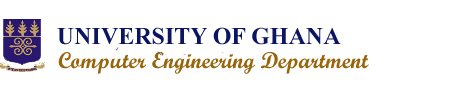
<style>
.page{position:relative;width:450px;height:90px;background:#ffffff}
.page>*{position:absolute;margin:0}
.t1{font:24px "TimesNewRomanPS-BoldMT";color:#0b1562}
.t2{font:23px "ScriptMTBold";color:#98650b}
</style>
<div class="page">
<p class="t1" style="left:57px;top:27px;width:284px;height:18px">UNIVERSITY OF GHANA</p>
<p class="t2" style="left:58px;top:52px;width:311px;height:22px">Computer Engineering Department</p>
</div>
